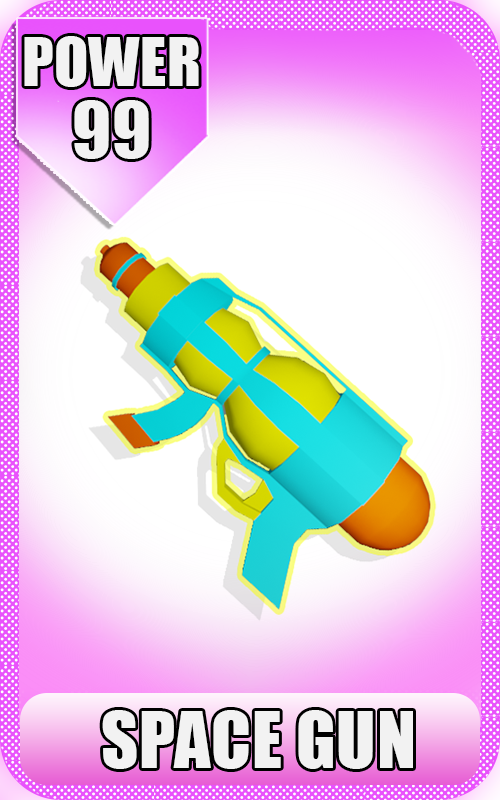
<style>
.page{position:relative;width:500px;height:800px}
.page>*{position:absolute;margin:0}
.t1{font:62.5px "Impact";letter-spacing:0.01em;color:#f2f2f2;font-variant:small-caps}
.t2{font:72px "Impact";letter-spacing:0.01em;color:#f2f2f2;font-variant:small-caps}
</style>
<div class="page">
<p class="t1" style="left:24px;top:36px;width:175px;height:51px">POWER</p>
<p class="t2" style="left:74px;top:100px;width:75px;height:59px">99</p>
<p class="t2" style="left:102px;top:710px;width:311px;height:59px">SPACE GUN</p>
</div>
